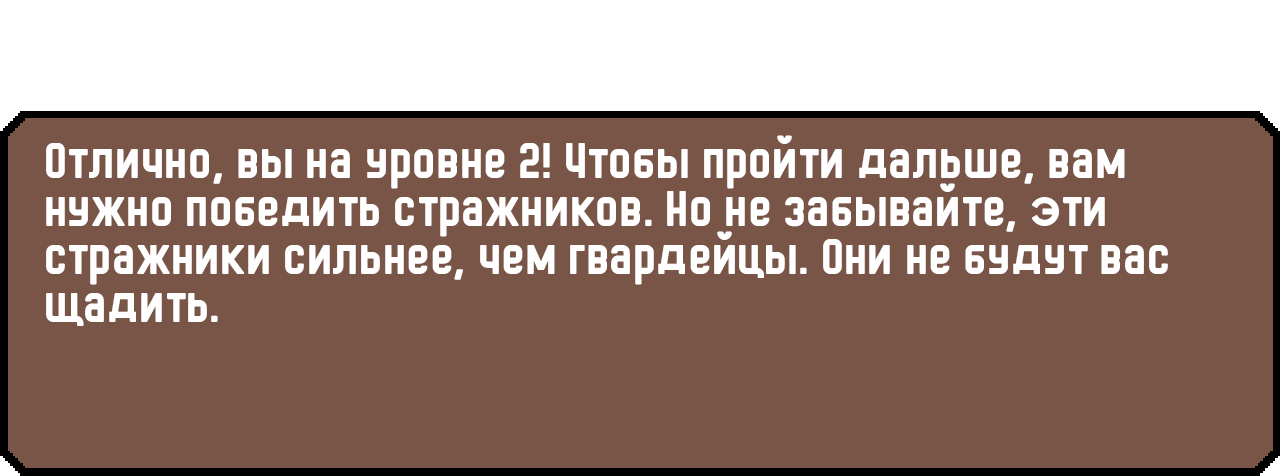
<style>
.page{position:relative;width:1280px;height:476px;background:#795548}
.page>*{position:absolute;margin:0}
.t1{font:48px/48px "HermanoMayor";color:#ffffff}
</style>
<div class="page">
<p class="t1" style="left:46px;top:135px;width:1122px;height:191px">Отлично, вы на уровне 2! Чтобы пройти дальше, вам нужно победить стражников. Но не забывайте, эти стражники сильнее, чем гвардейцы. Они не будут вас щадить.</p>
</div>
